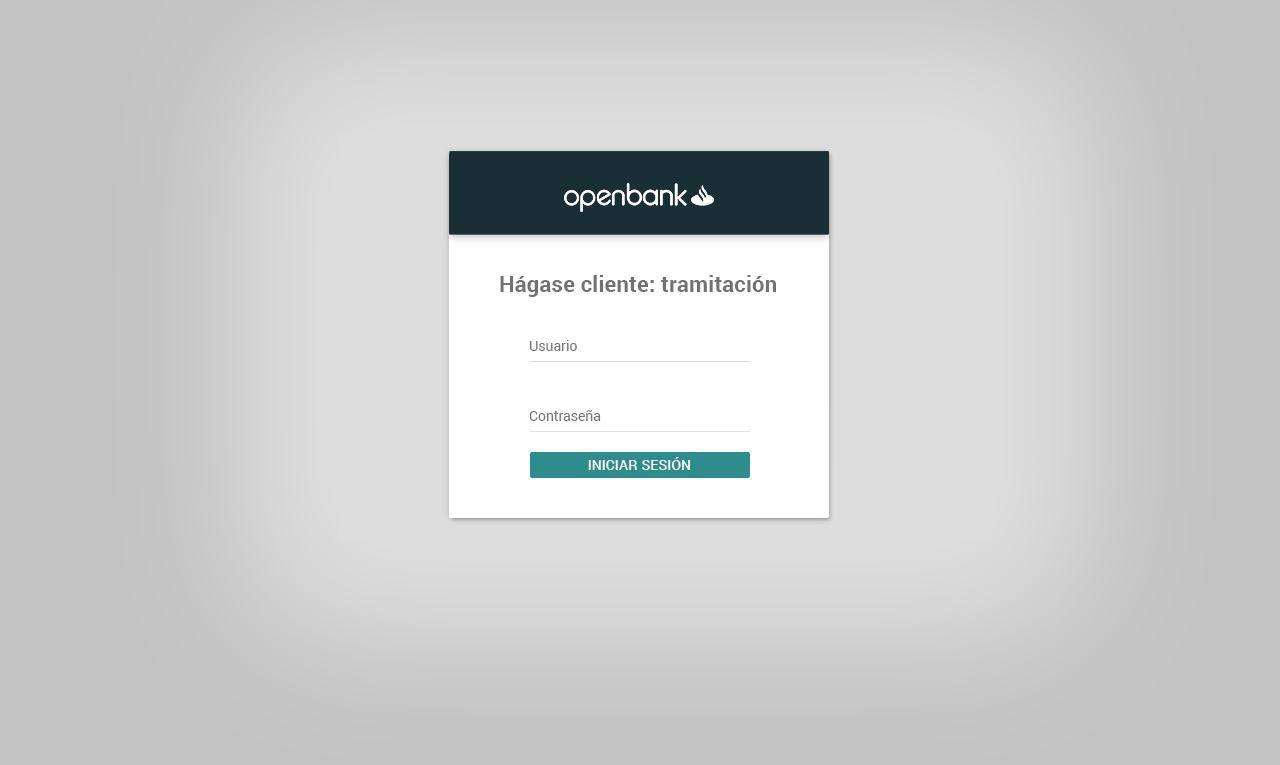
<style>
.page{position:relative;width:1280px;height:765px}
.page>*{position:absolute;margin:0}
.t1{font:22px "Roboto-Bold";letter-spacing:0.01em;color:#727272}
.t2{font:14px "Roboto-Regular";color:#76777a}
.t3{font:14px "Roboto-Medium";letter-spacing:0.01em;color:#ffffff}
</style>
<div class="page">
<p class="t1" style="left:500px;top:275px;width:276px;height:22px">Hágase cliente: tramitación</p>
<p class="t2" style="left:529px;top:340px;width:48px;height:11px">Usuario</p>
<p class="t2" style="left:529px;top:410px;width:72px;height:11px">Contraseña</p>
<p class="t3" style="left:588px;top:457px;width:102px;height:13px">INICIAR SESIÓN</p>
</div>
